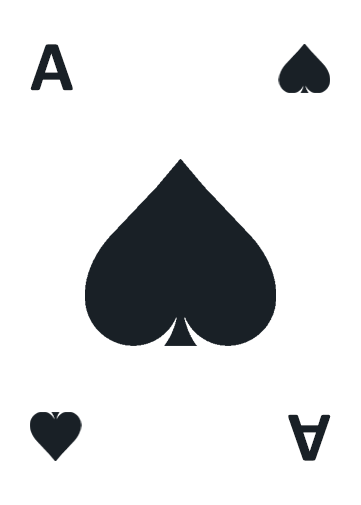
<style>
.page{position:relative;width:361px;height:505px;background:#ffffff}
.page>*{position:absolute;margin:0}
.t1{font:72px "Calibri-Bold";letter-spacing:-0.025em;color:#192026}
</style>
<div class="page">
<p class="t1" style="left:30px;top:44px;width:43px;height:47px">A</p>
<p class="t1" style="left:288px;top:414px;width:43px;height:47px;rotate:180deg">A</p>
</div>
